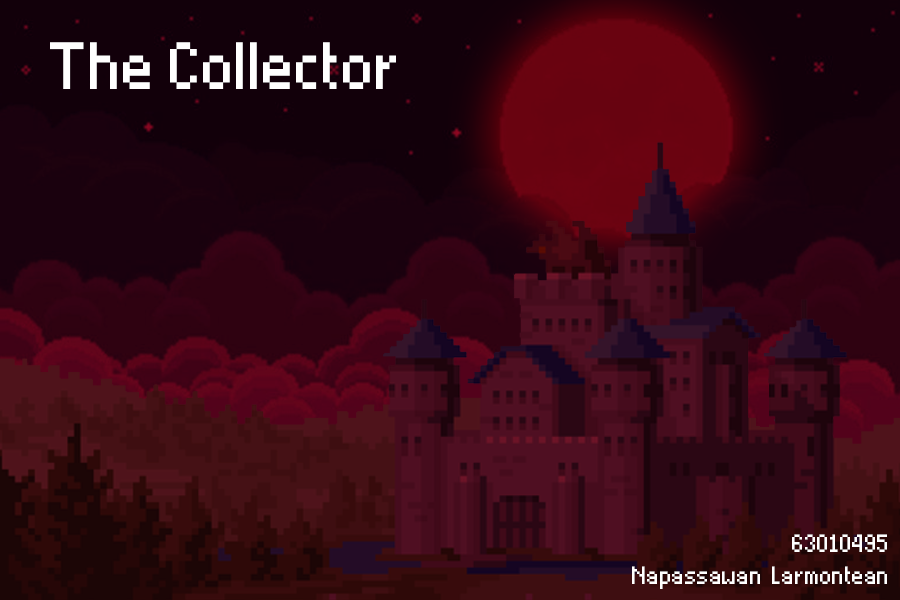
<style>
.page{position:relative;width:900px;height:600px}
.page>*{position:absolute;margin:0}
.t1{font:106.7px "Thintel";color:#ffffff}
.t2{font:40px/32px "Thintel";color:#ffffff}
</style>
<div class="page">
<p class="t1" style="left:50px;top:42px;width:346px;height:47px">The Collector</p>
<p class="t2" style="left:632px;top:534px;width:255px;height:55px;text-align:right">63010495<br>Napassawan  Larmontean</p>
</div>
